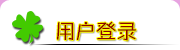
<style>
.page{position:relative;width:180px;height:50px;background:#ffffff}
.page>*{position:absolute;margin:0}
.t1{font:20px "FZZHYJW--GB1-0";color:#8c0000;font-weight:bold}
</style>
<div class="page">
<p class="t1" style="left:57px;top:21px;width:79px;height:20px">用户登录</p>
</div>
